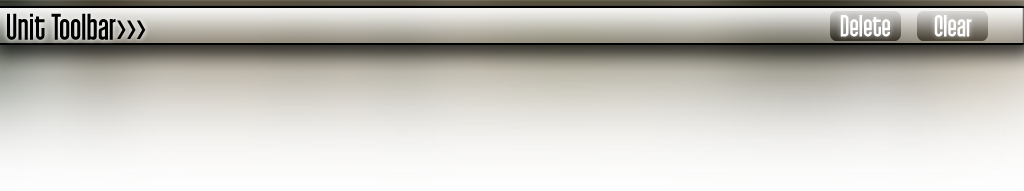
<style>
.page{position:relative;width:1024px;height:191px}
.page>*{position:absolute;margin:0}
.t1{font:36px "Qhytsdakx";color:#000000}
.t2{font:30px "Qhytsdakx";color:#ffffff}
</style>
<div class="page">
<p class="t1" style="left:7px;top:13px;width:139px;height:27px">Unit Toolbar&gt;&gt;&gt;</p>
<p class="t2" style="left:840px;top:15px;width:50px;height:22px">Delete</p>
<p class="t2" style="left:934px;top:15px;width:38px;height:22px">Clear</p>
</div>
